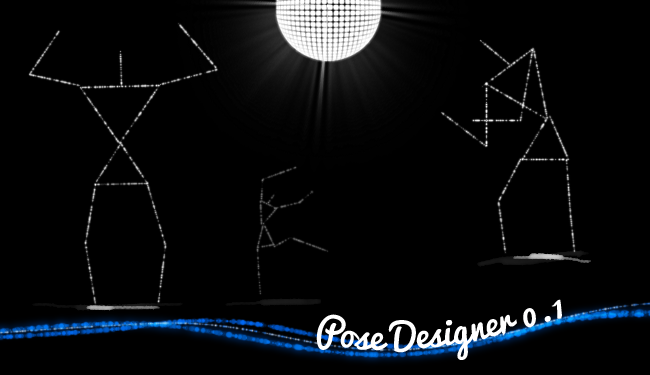
<style>
.page{position:relative;width:650px;height:375px;background:#000000}
.page>*{position:absolute;margin:0}
.t1{font:36px "Pacifico";color:#ffffff}
</style>
<div class="page">
<p class="t1" style="left:316px;top:299px;width:246px;height:61px">Pose Designer 0.1</p>
</div>
